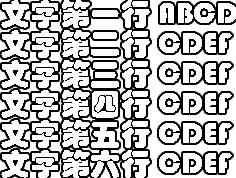
<style>
.page{position:relative;width:236px;height:178px;background:#fffefe}
.page>*{position:absolute;margin:0}
.t1{font:30px/30px "STHupo";color:#fffefe}
</style>
<div class="page">
<p class="t1" style="left:1px;top:0px;width:236px;height:178px">文字第一行ABCD<br>文字第二行CDEF<br>文字第三行CDEF<br>文字第四行CDEF<br>文字第五行CDEF<br>文字第六行CDEF</p>
</div>
